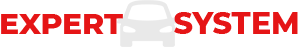
<style>
.page{position:relative;width:300px;height:47px;background:#ffffff}
.page>*{position:absolute;margin:0}
.t1{font:29.5px "Montserrat-ExtraBold";color:#e51516}
.t2{font:30px "Montserrat-ExtraBold";color:#e51516}
</style>
<div class="page">
<p class="t1" style="left:1px;top:14px;width:122px;height:20px">EXPERT</p>
<p class="t2" style="left:174px;top:12px;width:124px;height:22px">SYSTEM</p>
</div>
